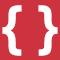
<style>
.page{position:relative;width:60px;height:60px;background:#cd333f}
.page>*{position:absolute;margin:0}
.t1{font:54.1px "Rockwell-ExtraBold";color:#ffffff;text-transform:uppercase;scale:1.04 1}
</style>
<div class="page">
<p class="t1" style="left:2px;top:5px;width:56px;height:51px">{ }</p>
</div>
